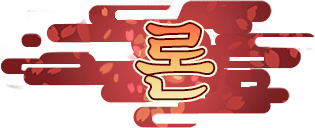
<style>
.page{position:relative;width:315px;height:128px;background:#ffffff}
.page>*{position:absolute;margin:0}
.t1{font:86.6px "SDKukdetopokki-aLt";letter-spacing:0.06em}
</style>
<div class="page">
<p class="t1" style="left:136px;top:24px;width:78px;height:75px">론</p>
</div>
